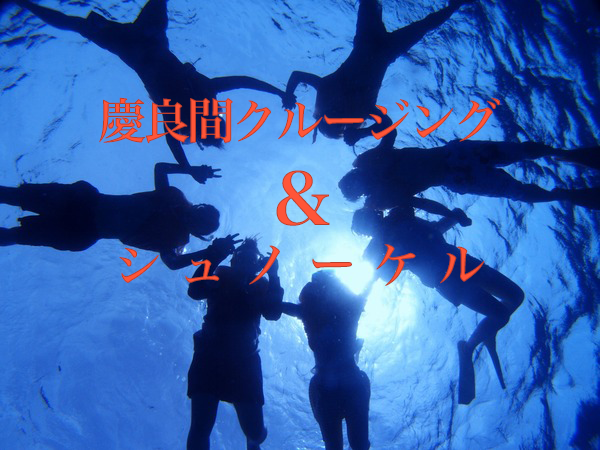
<style>
.page{position:relative;width:600px;height:450px}
.page>*{position:absolute;margin:0}
.t1{font:48px "HiraMinPro-W6";letter-spacing:-0.075em;text-transform:uppercase}
.t2{font:72px "HiraMinPro-W6";letter-spacing:-0.075em;text-transform:uppercase}
.t3{font:48px "HiraMinPro-W6";letter-spacing:0.35em;text-transform:uppercase}
</style>
<div class="page">
<p class="t1" style="left:99px;top:97px;width:401px;height:189px;text-align:center">慶良間クルージング<br><span class="t2">＆<br></span><span class="t3">シュノーケル</span></p>
</div>
